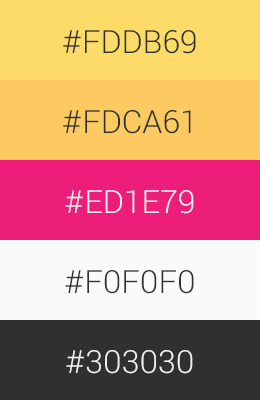
<style>
.page{position:relative;width:260px;height:400px}
.page>*{position:absolute;margin:0}
.t1{font:32px "Roboto-Light";color:#303030}
.t2{font:32px "Roboto-Light";color:#f0f0f0}
</style>
<div class="page">
<p class="t1" style="left:63px;top:30px;width:133px;height:24px">#FDDB69</p>
<p class="t1" style="left:63px;top:110px;width:128px;height:24px">#FDCA61</p>
<p class="t2" style="left:65px;top:190px;width:129px;height:24px">#ED1E79</p>
<p class="t1" style="left:65px;top:270px;width:129px;height:24px">#F0F0F0</p>
<p class="t2" style="left:66px;top:350px;width:127px;height:24px">#303030</p>
</div>
